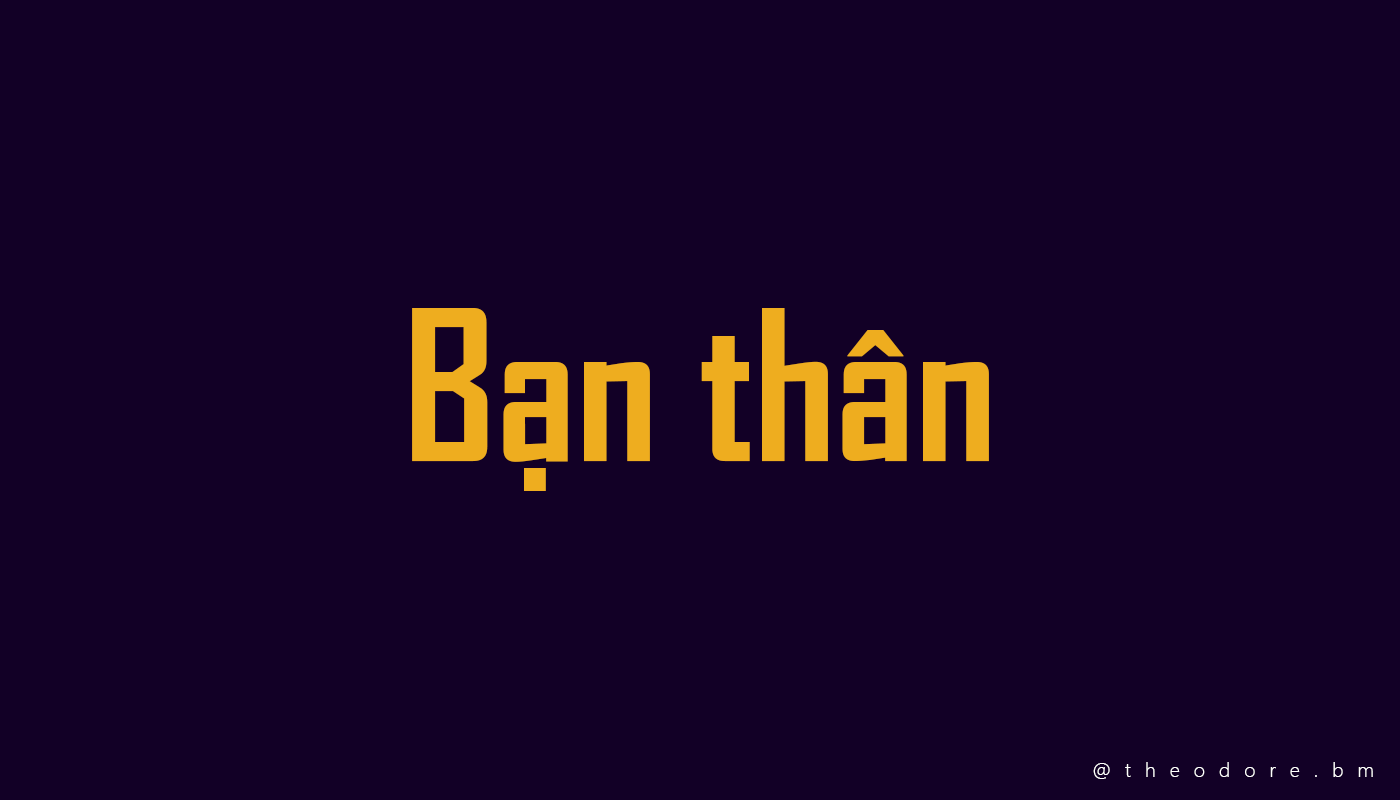
<style>
.page{position:relative;width:1400px;height:800px;background:#120026}
.page>*{position:absolute;margin:0}
.t1{font:200px "SVN-AgencyFBbold";color:#eead1f}
.t2{font:20px "SegoeUI-Light";letter-spacing:0.7em;color:#ffffff}
</style>
<div class="page">
<p class="t1" style="left:412px;top:308px;width:577px;height:183px">Bạn thân</p>
<p class="t2" style="left:1093px;top:762px;width:280px;height:17px">@theodore.bm</p>
</div>
